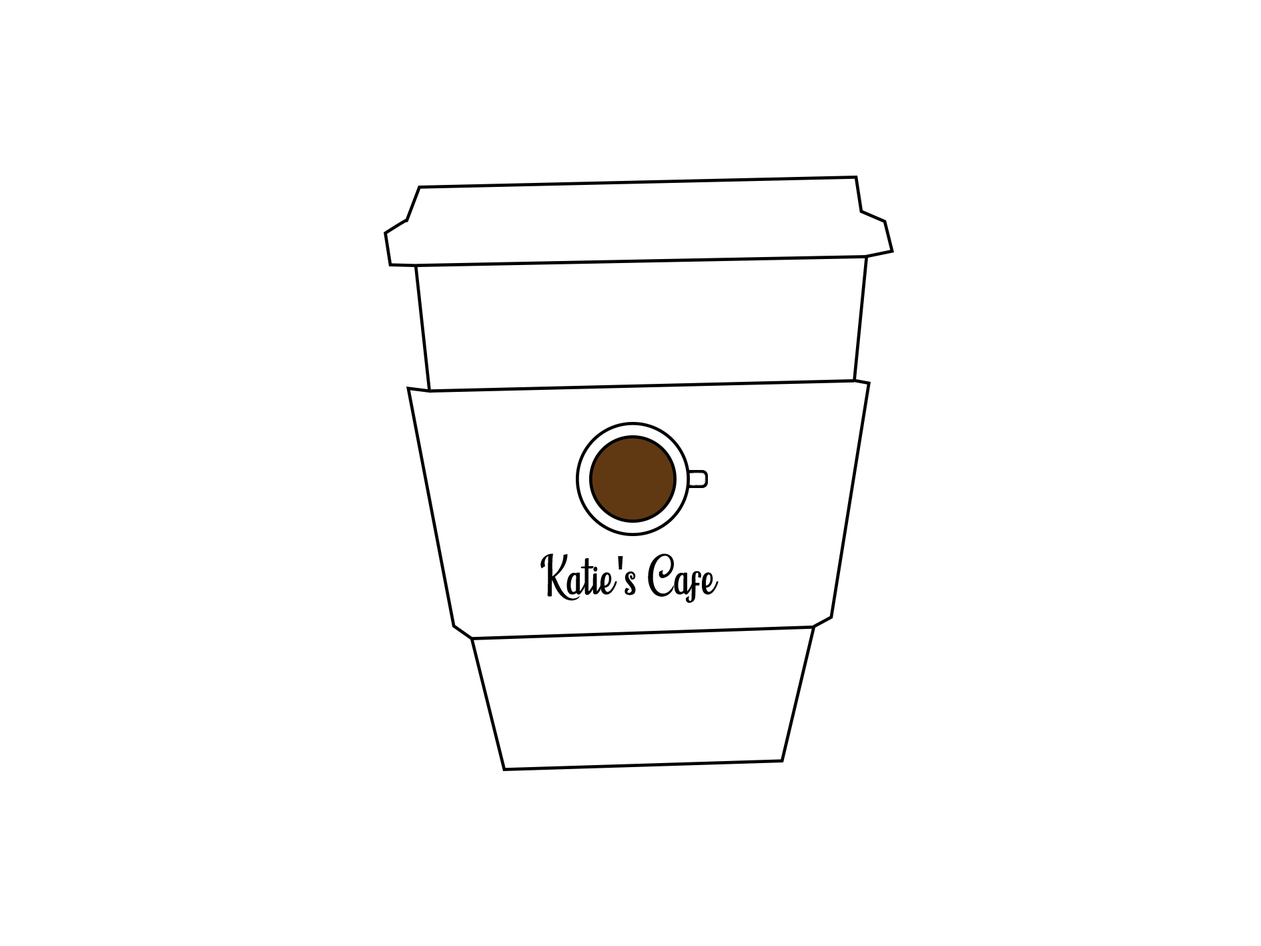
<style>
.page{position:relative;width:1261px;height:946px;background:#ffffff}
.page>*{position:absolute;margin:0}
.t1{font:55.6px "HumbleCafe";color:#000000}
.t2{font:55.6px "MyriadPro-Regular";color:#000000}
</style>
<div class="page">
<p class="t1" style="left:540px;top:553px;width:179px;height:50px">Katie<span class="t2">'</span>s Cafe</p>
</div>
